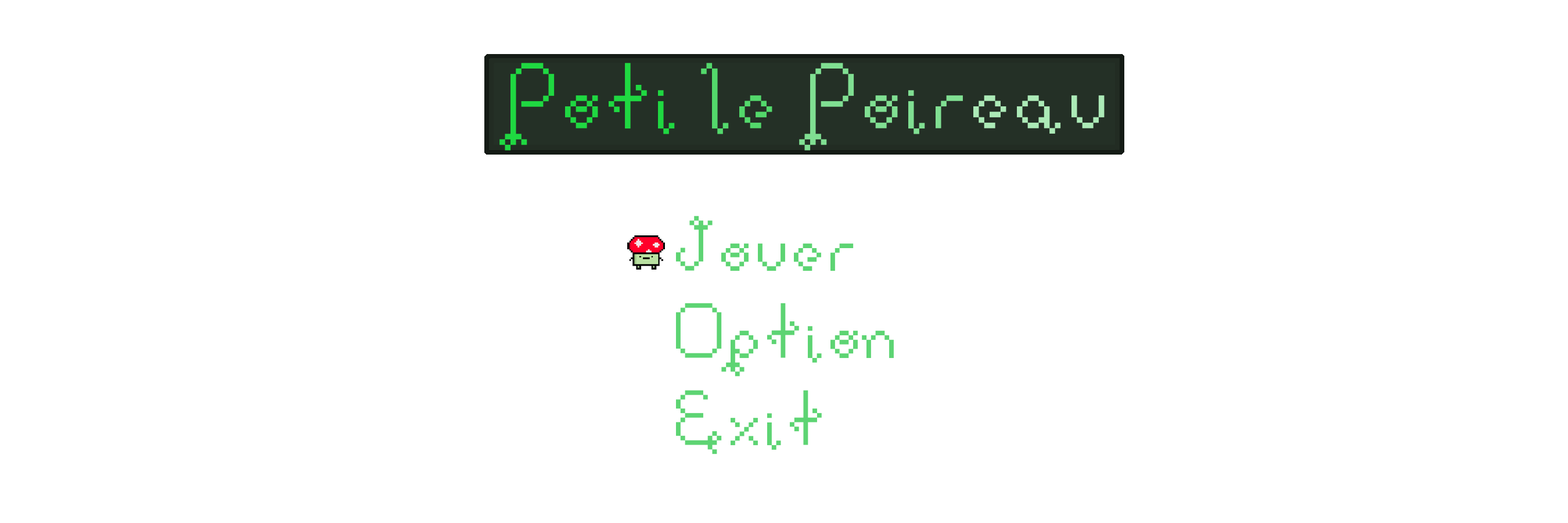
<style>
.page{position:relative;width:1568px;height:523px;background:#ffffff}
.page>*{position:absolute;margin:0}
.t1{font:87.1px "DollPixellowzz";color:#1fd841}
.t2{font:87.1px "DollPixellowzz";color:#53d86b}
.t3{font:87.1px "DollPixellowzz";color:#80df92}
.t4{font:87.1px "DollPixellowzz";color:#aceab7}
.t5{font:72.6px "DollPixellowzz";color:#5dd473}
</style>
<div class="page">
<p class="t1" style="left:499px;top:63px;width:606px;height:87px">Poti <span class="t2">le </span><span class="t3">Poir</span><span class="t4">eau</span></p>
<p class="t5" style="left:676px;top:215px;width:218px;height:239px">Jouer<br>Option<br>Exit</p>
</div>
